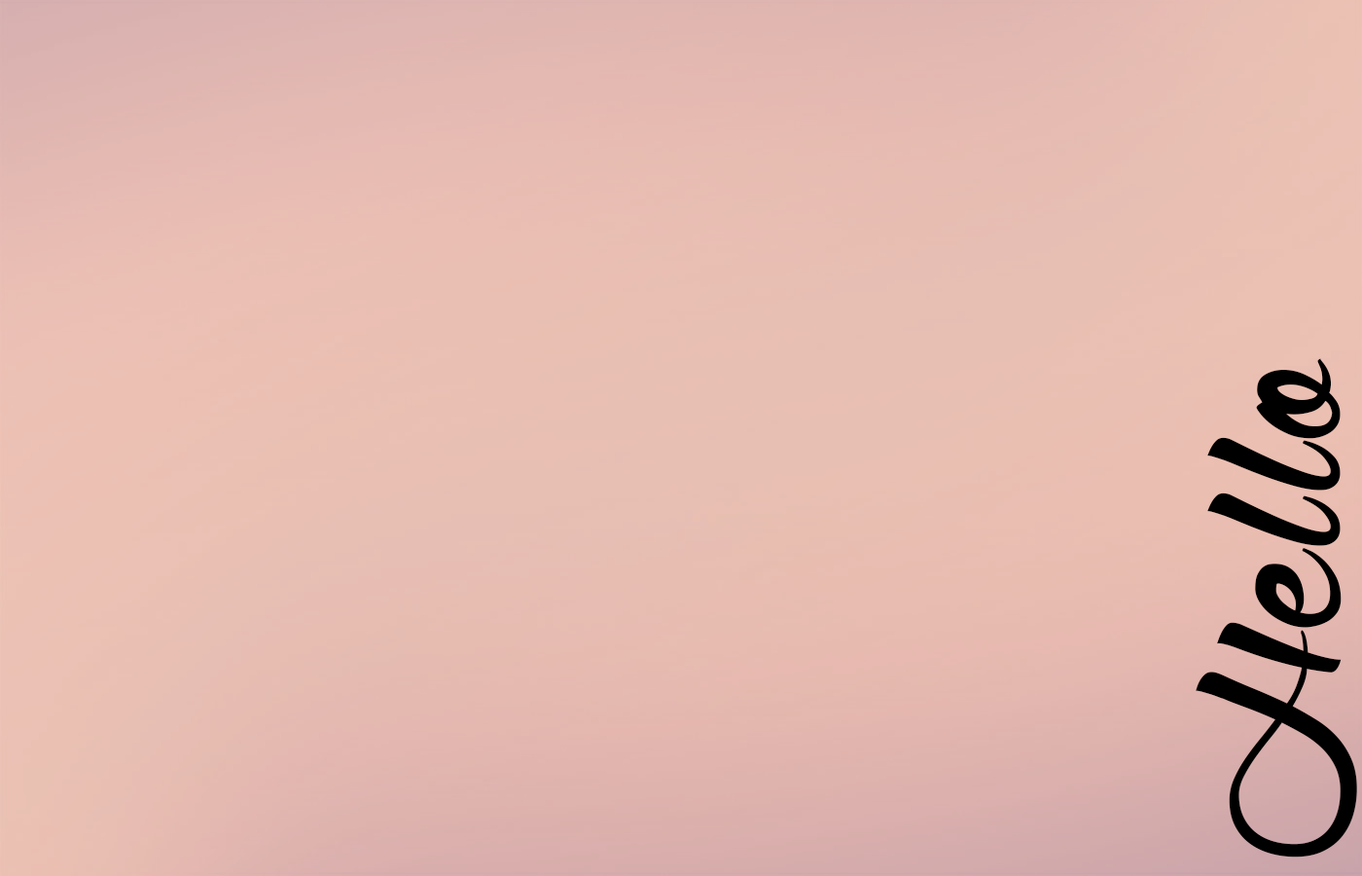
<style>
.page{position:relative;width:1362px;height:876px}
.page>*{position:absolute;margin:0}
.t1{font:316.2px "WolfintheCityLight";letter-spacing:0.035em;color:#000000}
.t2{font:316.2px "WolfintheCity";letter-spacing:0.035em;color:#000000}
</style>
<div class="page">
<p class="t1" style="left:1196px;top:358px;width:161px;height:499px;rotate:-90deg"><span class="t2">H</span>ello</p>
</div>
